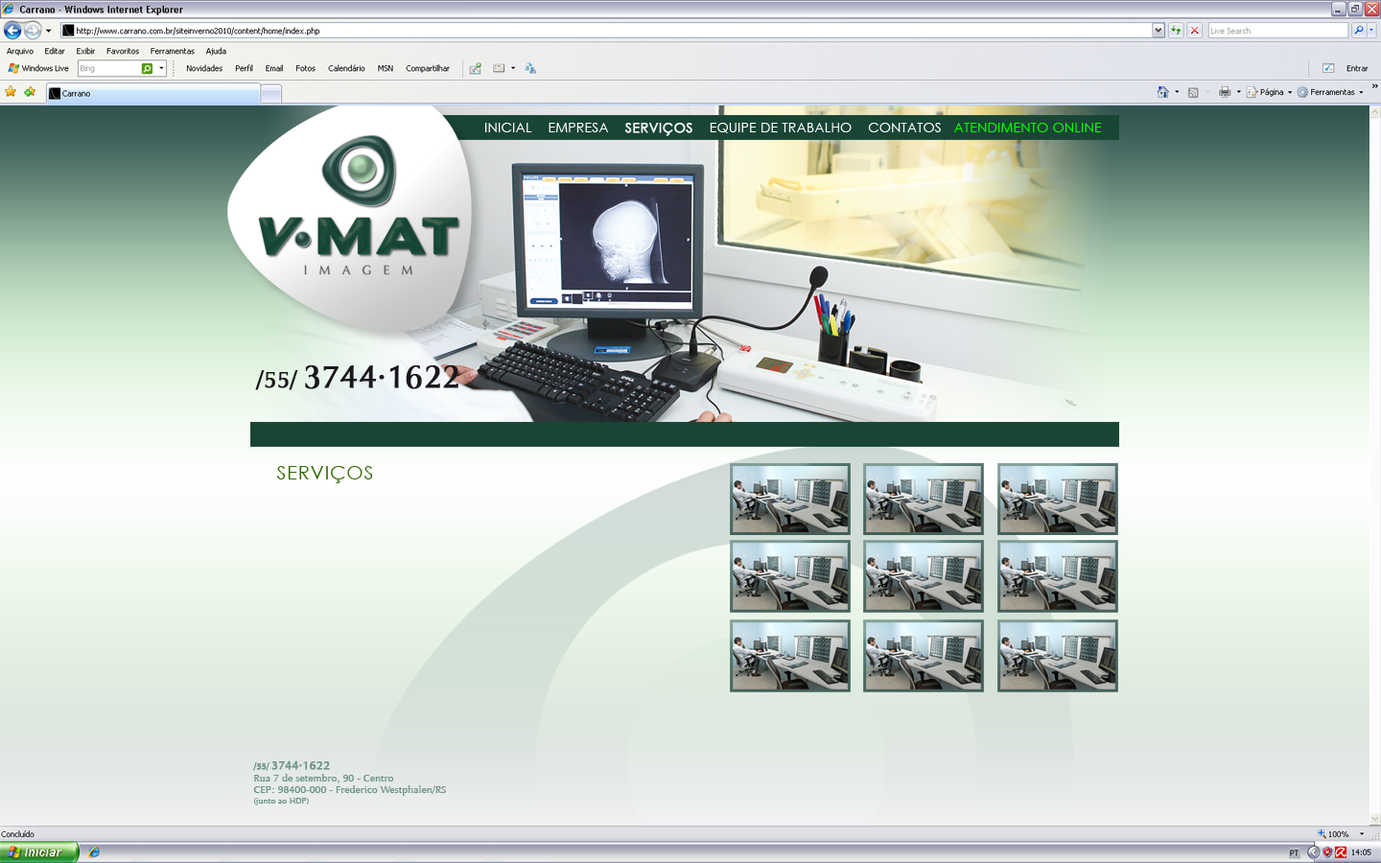
<style>
.page{position:relative;width:1381px;height:863px}
.page>*{position:absolute;margin:0}
.t1{font:13px "CenturyGothic";letter-spacing:0.035em;color:#ffffff}
.t2{font:13px "CenturyGothic";letter-spacing:0.035em;color:#ffffff;font-weight:bold}
.t3{font:13px "CenturyGothic";letter-spacing:0.035em;color:#06fe00}
.t4{font:31.6px "JaguarJCBook";color:#1a171b;font-weight:bold}
.t5{font:22.6px "JaguarJCBook";color:#1a171b;font-weight:bold}
.t6{font:19.4px "CenturyGothic";letter-spacing:0.035em;color:#336600}
.t7{font:10.1px "JaguarJCBook";color:#6d9486}
.t8{font:8.4px "JaguarJCBook";color:#6d9486;font-weight:bold}
.t9{font:11.8px "JaguarJCBook";color:#6d9486;font-weight:bold}
.t10{font:8.4px "JaguarJCBook";color:#6d9486}
</style>
<div class="page">
<p class="t1" style="left:485px;top:123px;width:617px;height:13px">INICIAL    EMPRESA    <span class="t2">SERVIÇOS</span>    EQUIPE DE TRABALHO    CONTATOS   <span class="t3">ATENDIMENTO ONLINE</span></p>
<p class="t4" style="left:255px;top:365px;width:204px;height:25px"><span class="t5">/55/ </span>3744·1622</p>
<p class="t6" style="left:276px;top:466px;width:97px;height:17px">SERVIÇOS</p>
<p class="t7" style="left:253px;top:761px;width:193px;height:45px"><span class="t8">/55/ </span><span class="t9">3744·1622<br></span>Rua 7 de setembro, 90 - Centro<br>CEP: 98400-000 - Frederico Westphalen/RS<br><span class="t10">(junto ao HDP)</span></p>
</div>
